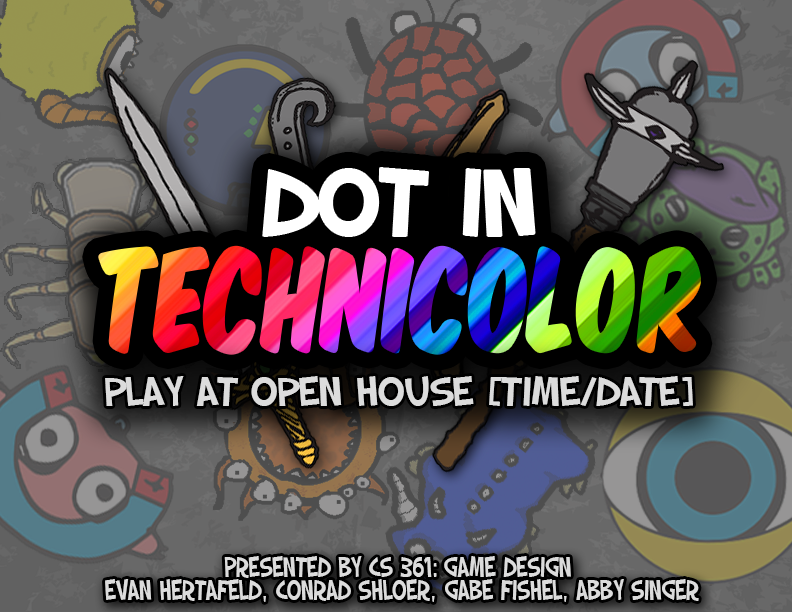
<style>
.page{position:relative;width:792px;height:612px}
.page>*{position:absolute;margin:0}
.t1{font:43.1px "SFSlapstickComic";color:#dcdcdc}
.t2{font:30px/23px "SFSlapstickComic";color:#dcdcdc;scale:0.78 1}
</style>
<div class="page">
<p class="t1" style="left:105px;top:376px;width:588px;height:30px">Play at Open House [Time/date]</p>
<p class="t2" style="left:105px;top:556px;width:594px;height:46px;text-align:center">Presented By CS 361: Game Design <br>Evan Hertafeld, Conrad Shloer, Gabe Fishel, Abby Singer</p>
</div>
